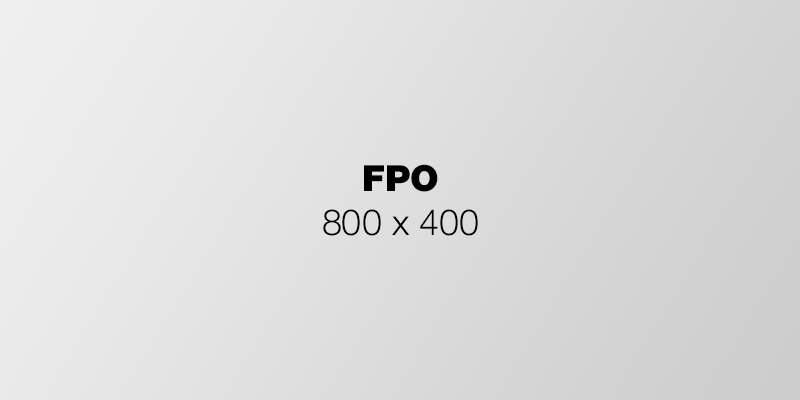
<style>
.page{position:relative;width:800px;height:400px}
.page>*{position:absolute;margin:0}
.t1{font:36px/24px "HelveticaNeueLTPro-Lt";color:#000000}
.t2{font:36px/24px "HelveticaNeueLTPro-Blk";color:#000000}
</style>
<div class="page">
<p class="t1" style="left:323px;top:164px;width:155px;height:72px;text-align:center"><span class="t2">FPO<br></span>800 x 400</p>
</div>
